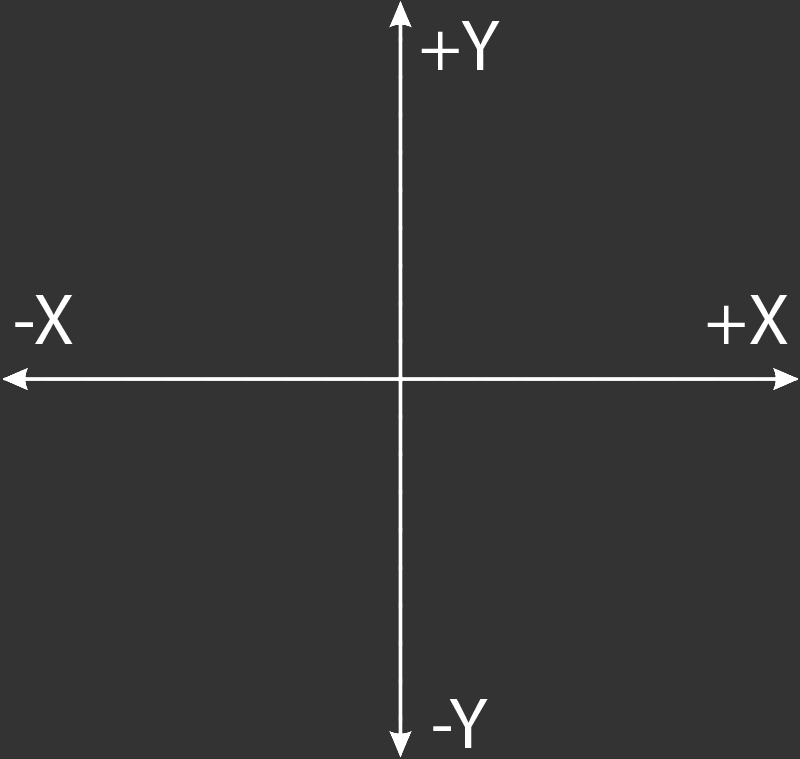
<style>
.page{position:relative;width:800px;height:759px;background:#333333}
.page>*{position:absolute;margin:0}
.t1{font:72px "MyriadPro-Regular";color:#ffffff}
</style>
<div class="page">
<p class="t1" style="left:421px;top:21px;width:79px;height:49px">+Y</p>
<p class="t1" style="left:15px;top:295px;width:58px;height:49px">-X</p>
<p class="t1" style="left:707px;top:295px;width:81px;height:49px">+X</p>
<p class="t1" style="left:433px;top:699px;width:55px;height:49px">-Y</p>
</div>
